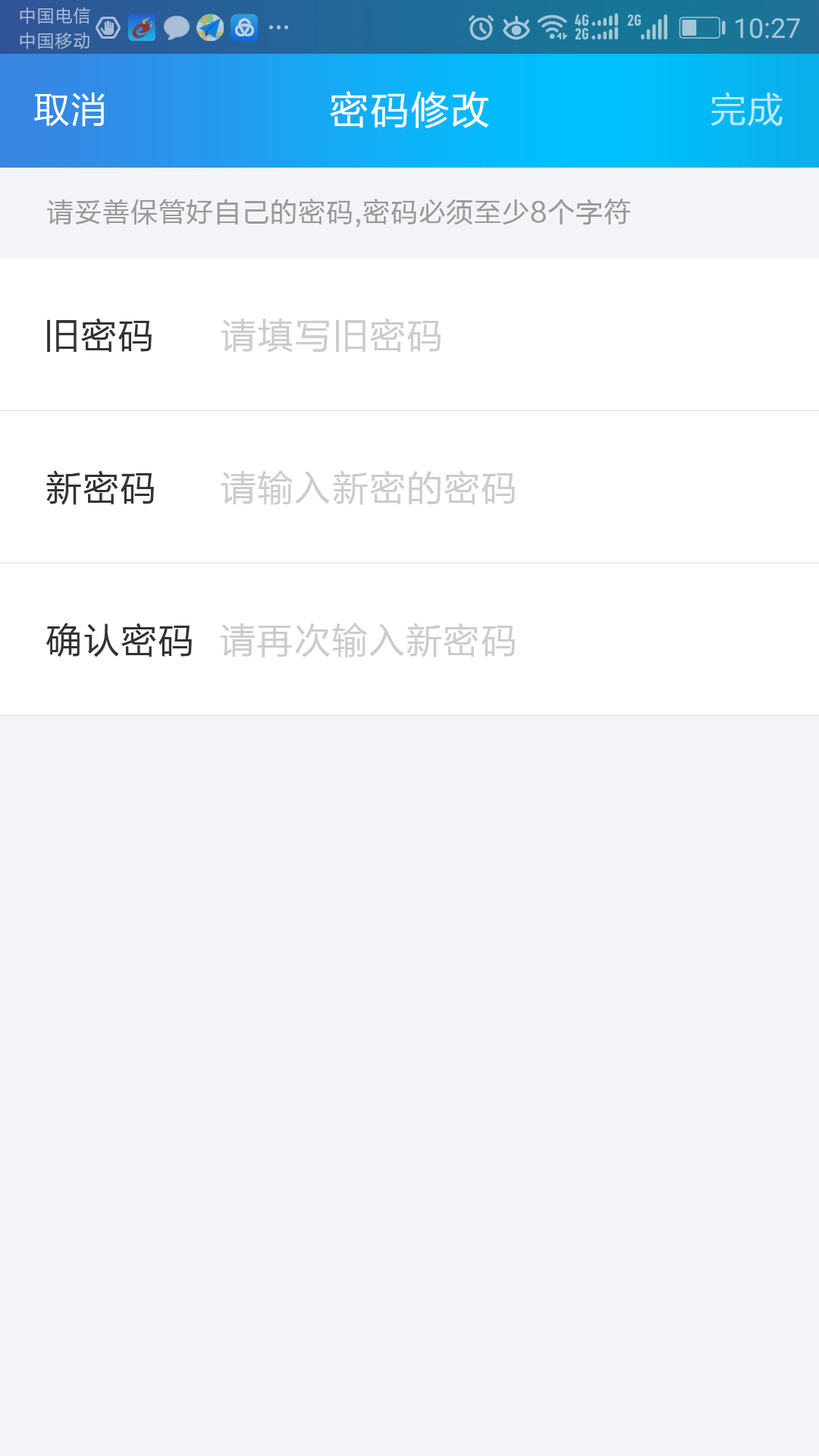
<style>
.page{position:relative;width:819px;height:1456px;background:#f2f4f8}
.page>*{position:absolute;margin:0}
.t1{font:36.4px "FZLTHK--GBK1-0";letter-spacing:0.025em;color:#ffffff}
.t2{font:39.4px "FZLTHK--GBK1-0";letter-spacing:0.025em;color:#ffffff}
.t3{font:36.4px "FZLTHK--GBK1-0";letter-spacing:0.025em;color:#b2ebff}
.t4{font:27.3px "FZLTHK--GBK1-0";letter-spacing:0.025em;color:#999999}
.t5{font:36.4px "FZLTHK--GBK1-0";letter-spacing:0.025em;color:#333333}
.t6{font:36.4px "FZLTHK--GBK1-0";letter-spacing:0.025em;color:#cccccc}
</style>
<div class="page">
<p class="t1" style="left:34px;top:93px;width:71px;height:34px">取消</p>
<p class="t2" style="left:330px;top:91px;width:159px;height:38px">密码修改</p>
<p class="t3" style="left:711px;top:92px;width:72px;height:35px">完成</p>
<p class="t4" style="left:47px;top:199px;width:583px;height:28px">请妥善保管好自己的密码,密码必须至少8个字符</p>
<p class="t5" style="left:47px;top:318px;width:105px;height:35px">旧密码</p>
<p class="t6" style="left:221px;top:318px;width:220px;height:35px">请填写旧密码</p>
<p class="t5" style="left:46px;top:470px;width:108px;height:35px">新密码</p>
<p class="t6" style="left:221px;top:470px;width:294px;height:35px">请输入新密的密码</p>
<p class="t5" style="left:46px;top:623px;width:146px;height:34px">确认密码</p>
<p class="t6" style="left:220px;top:623px;width:295px;height:34px">请再次输入新密码</p>
</div>
